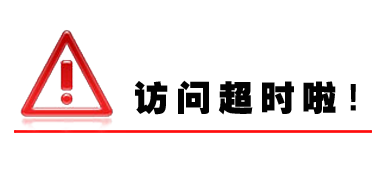
<style>
.page{position:relative;width:380px;height:180px;background:#ffffff}
.page>*{position:absolute;margin:0}
.t1{font:34.5px "HeitiEG-Ultra-GB";letter-spacing:0.2em;color:#020202}
</style>
<div class="page">
<p class="t1" style="left:135px;top:80px;width:221px;height:35px">访问超时啦！</p>
</div>
